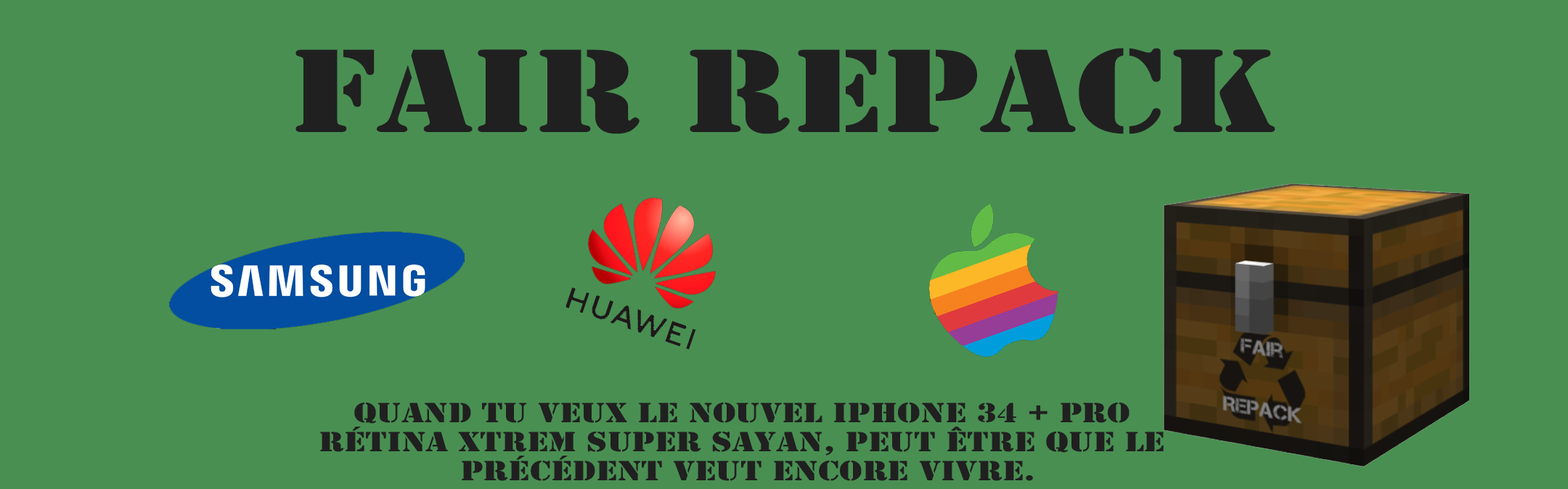
<style>
.page{position:relative;width:1568px;height:489px;background:#498f52}
.page>*{position:absolute;margin:0}
.t1{font:123.4px "ArmyWide";color:#202020}
.t2{font:29px "ArmyWide";color:#202020}
</style>
<div class="page">
<p class="t1" style="left:295px;top:48px;width:980px;height:86px">Fair repack</p>
<p class="t2" style="left:320px;top:402px;width:844px;height:79px;text-align:center">quand tu veux le nouvel iphone 34 + pro rétina xtrem super sayan, peut être que le précédent veut encore vivre.</p>
</div>
